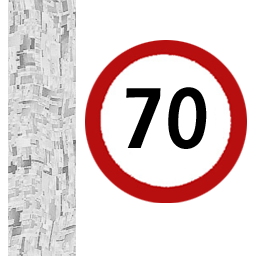
<style>
.page{position:relative;width:256px;height:256px;background:#ffffff}
.page>*{position:absolute;margin:0}
.t1{font:89.6px "ErasITC-Demi";color:#000000;scale:0.8 1}
</style>
<div class="page">
<p class="t1" style="left:126px;top:87px;width:81px;height:62px">70</p>
</div>
